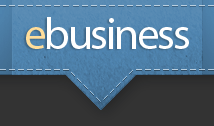
<style>
.page{position:relative;width:214px;height:126px;background:#333333}
.page>*{position:absolute;margin:0}
.t1{font:45px "MyriadPro-Regular";letter-spacing:-0.05em;color:#ffffff}
.t2{font:45px "MyriadPro-Regular";letter-spacing:-0.05em;color:#ffdd9a}
</style>
<div class="page">
<p class="t1" style="left:26px;top:17px;width:163px;height:32px"><span class="t2">e</span>business</p>
</div>
